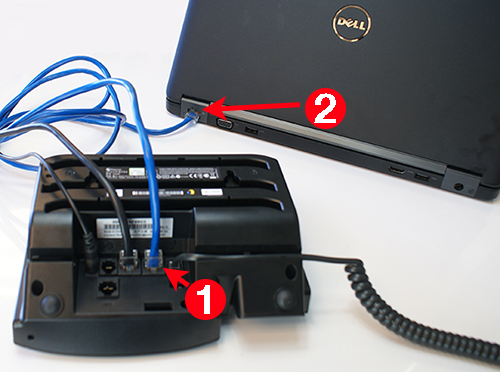
<style>
.page{position:relative;width:500px;height:372px}
.page>*{position:absolute;margin:0}
.t1{font:41.7px "HelveticaNeueLTStd-Bd";color:#ffffff}
</style>
<div class="page">
<p class="t1" style="left:314px;top:93px;width:22px;height:30px">2</p>
<p class="t1" style="left:197px;top:285px;width:13px;height:29px">1</p>
</div>
